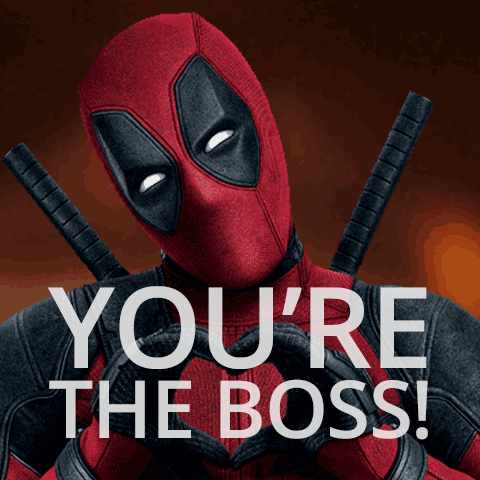
<style>
.page{position:relative;width:480px;height:480px}
.page>*{position:absolute;margin:0}
.t1{font:80.3px/70.1px "OpenSans-Semibold";letter-spacing:-0.02em;color:#d2d2d3}
.t2{font:112.8px/70.1px "OpenSans-Semibold";letter-spacing:-0.02em;color:#d2d2d3}
</style>
<div class="page">
<p class="t1" style="left:48px;top:286px;width:380px;height:154px"><span class="t2">YOU’RE<br></span>THE BOSS!</p>
</div>
